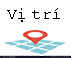
<style>
.page{position:relative;width:71px;height:58px;background:#ffffff}
.page>*{position:absolute;margin:0}
.t1{font:16px "CourierNewPSMT";color:#000000}
</style>
<div class="page">
<p class="t1" style="left:7px;top:8px;width:53px;height:14px">Vị trí</p>
</div>
